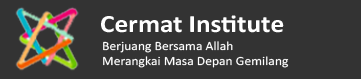
<style>
.page{position:relative;width:361px;height:79px;background:#333333}
.page>*{position:absolute;margin:0}
.t1{font:25px "Calibri-Bold";color:#ffffff;scale:1.09 1}
.t2{font:12.5px "Calibri";color:#ffffff;scale:1.09 1}
</style>
<div class="page">
<p class="t1" style="left:101px;top:15px;width:183px;height:18px">Cermat Institute</p>
<p class="t2" style="left:103px;top:41px;width:186px;height:27px">Berjuang Bersama Allah<br>Merangkai Masa Depan Gemilang</p>
</div>
